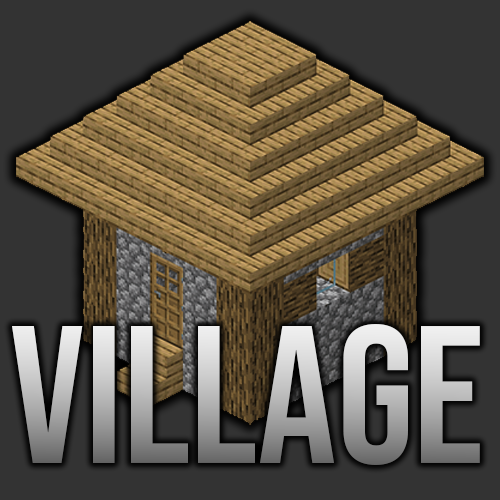
<style>
.page{position:relative;width:500px;height:500px;background:#333333}
.page>*{position:absolute;margin:0}
.t1{font:196px "BebasNeue-Regular"}
</style>
<div class="page">
<p class="t1" style="left:12px;top:324px;width:468px;height:141px">VILLAGE</p>
</div>
